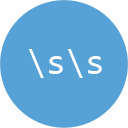
<style>
.page{position:relative;width:128px;height:128px;background:#56a1d5}
.page>*{position:absolute;margin:0}
.t1{font:36px "Consolas";color:#ffffff}
</style>
<div class="page">
<p class="t1" style="left:28px;top:49px;width:74px;height:29px">\s\s</p>
</div>
